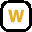
<style>
.page{position:relative;width:32px;height:32px;background:#ffffff}
.page>*{position:absolute;margin:0}
.t1{font:18px "MyriadPro-Bold";letter-spacing:0.05em;color:#e3b025}
</style>
<div class="page">
<p class="t1" style="left:8px;top:9px;width:17px;height:14px">W</p>
</div>
